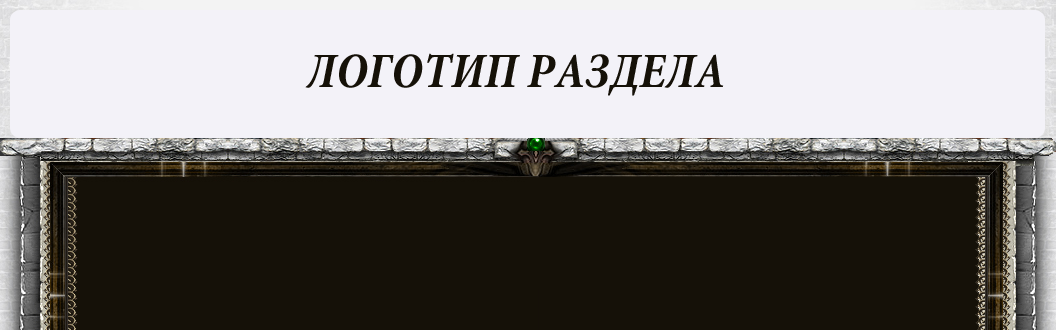
<style>
.page{position:relative;width:1056px;height:330px;background:#151108}
.page>*{position:absolute;margin:0}
.t1{font:50px "MinionPro-BoldCnIt";color:#151108}
</style>
<div class="page">
<p class="t1" style="left:305px;top:53px;width:419px;height:43px">ЛОГОТИП РАЗДЕЛА</p>
</div>
